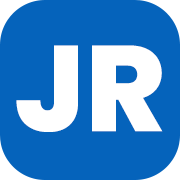
<style>
.page{position:relative;width:180px;height:180px;background:#0563bb}
.page>*{position:absolute;margin:0}
.t1{font:121.3px "Poppins-ExtraBold";color:#ffffff}
</style>
<div class="page">
<p class="t1" style="left:16px;top:45px;width:147px;height:87px">JR</p>
</div>
